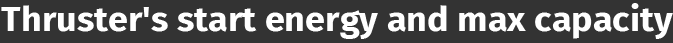
<style>
.page{position:relative;width:673px;height:43px;background:#333333}
.page>*{position:absolute;margin:0}
.t1{font:34.2px "FiraSans-Bold";color:#ffffff;scale:1.05 1}
</style>
<div class="page">
<p class="t1" style="left:1px;top:3px;width:672px;height:36px">Thruster's start energy and max capacity</p>
</div>
